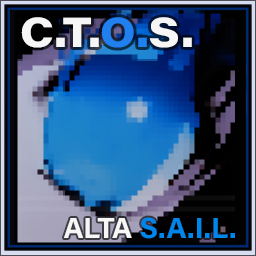
<style>
.page{position:relative;width:256px;height:256px}
.page>*{position:absolute;margin:0}
.t1{font:41.7px "AcuminConcept_760.000wght_112.000wdth";color:#f6f6f6}
.t2{font:41.7px "AcuminConcept_760.000wght_112.000wdth";color:#2080f0}
.t3{font:29.2px "AcuminConcept-Bold";color:#0085eb}
.t4{font:29.2px "AcuminConcept-Bold";color:#f6f6f6}
</style>
<div class="page">
<p class="t1" style="left:21px;top:17px;width:171px;height:31px">C.T.<span class="t2">O.</span>S.</p>
<p class="t3" style="left:63px;top:217px;width:172px;height:22px"><span class="t4">ALTA </span>S.A.I.L.</p>
</div>
